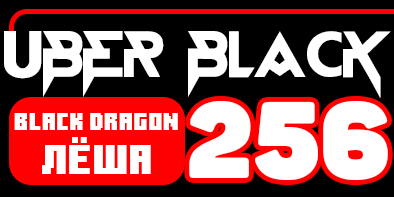
<style>
.page{position:relative;width:394px;height:197px;background:#000000}
.page>*{position:absolute;margin:0}
.t1{font:65.3px "BlackStarFJNTBYLYAJKA";color:#ffffff;text-transform:uppercase}
.t2{font:106.9px "Panton-ExtraBlack";color:#ffffff;text-transform:uppercase}
.t3{font:25px "MinecraftTen";color:#ffffff;text-transform:uppercase}
.t4{font:41.7px "MinecraftTen";color:#ffffff;text-transform:uppercase}
</style>
<div class="page">
<p class="t1" style="left:4px;top:31px;width:387px;height:67px">UBER BLACK</p>
<p class="t2" style="left:189px;top:101px;width:199px;height:80px">256</p>
<p class="t3" style="left:14px;top:113px;width:164px;height:17px">Black Dragon</p>
<p class="t4" style="left:42px;top:137px;width:109px;height:37px">ЛЁША</p>
</div>
